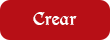
<style>
.page{position:relative;width:110px;height:40px;background:#b70f16}
.page>*{position:absolute;margin:0}
.t1{font:13px "BerryRotunda-Regular";color:#ffffff}
</style>
<div class="page">
<p class="t1" style="left:33px;top:12px;width:44px;height:13px">Crear</p>
</div>
